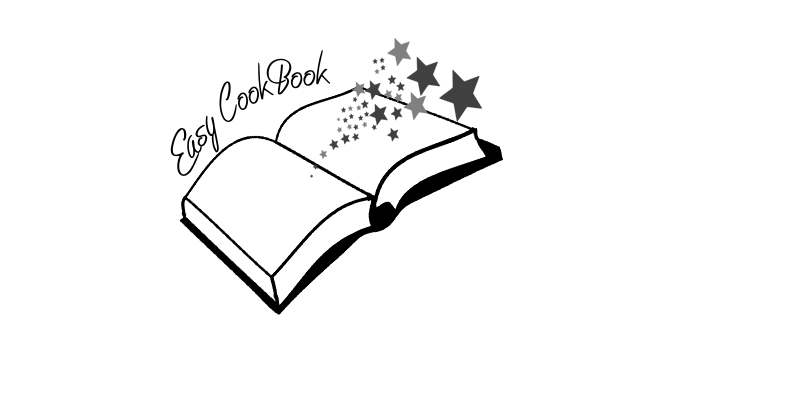
<style>
.page{position:relative;width:800px;height:412px;background:#ffffff}
.page>*{position:absolute;margin:0}
.t1{font:32.5px "EasyRider";color:#000000;scale:0.76 1}
</style>
<div class="page">
<p class="t1" style="left:170px;top:49px;width:161px;height:127px;rotate:-32deg">Easy CookBook</p>
</div>
